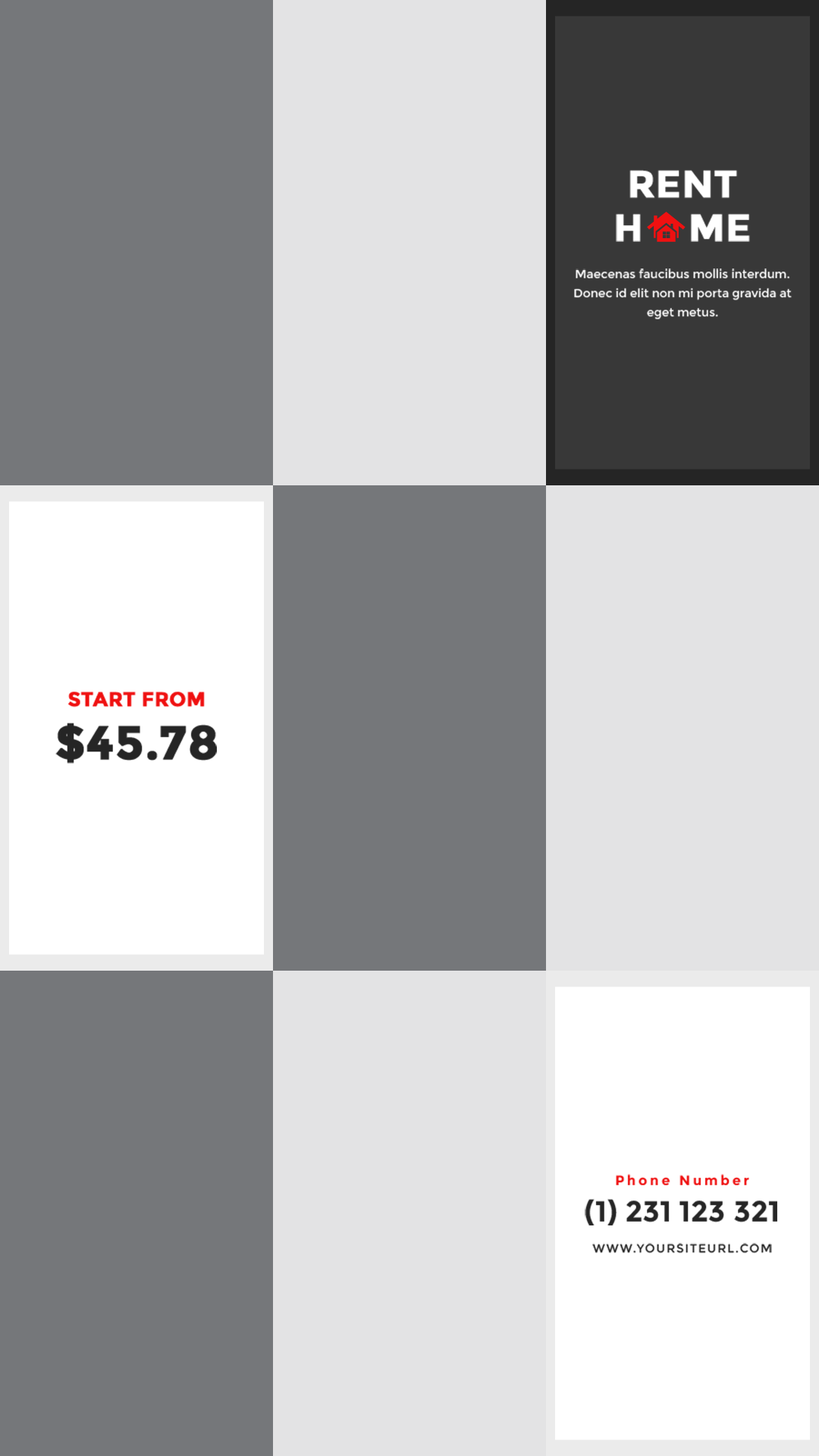
<style>
.page{position:relative;width:819px;height:1456px;background:#e3e3e4}
.page>*{position:absolute;margin:0}
.t1{font:38.1px/43px "Montserrat-Bold";color:#ffffff;text-transform:uppercase;font-weight:bold}
.t2{font:11.8px/19.1px "Montserrat-Regular";color:#ffffff}
.t3{font:20px/53.5px "Montserrat-Bold";color:#ef1111;text-transform:uppercase;font-weight:bold}
.t4{font:47.3px/53.5px "Montserrat-Bold";color:#252525;text-transform:uppercase;font-weight:bold}
.t5{font:29.1px/36.4px "Montserrat-Bold";color:#252525}
.t6{font:13.6px/36.4px "Montserrat-Bold";letter-spacing:0.2em;color:#ef1111}
.t7{font:11.8px "Montserrat-Regular";letter-spacing:0.1em;color:#252525;text-transform:uppercase}
</style>
<div class="page">
<p class="t1" style="left:616px;top:170px;width:134px;height:72px;text-align:center">rent<br>h    me</p>
<p class="t2" style="left:574px;top:268px;width:218px;height:51px;text-align:center">Maecenas faucibus mollis interdum. Donec id elit non mi porta gravida at eget metus.</p>
<p class="t3" style="left:55px;top:692px;width:162px;height:72px;text-align:center">start from<br><span class="t4">$45.78</span></p>
<p class="t5" style="left:585px;top:1174px;width:192px;height:51px;text-align:center"><span class="t6">Phone Number<br></span>(1) 231 123 321</p>
<p class="t7" style="left:592px;top:1243px;width:180px;height:11px">www.yoursiteurl.com</p>
</div>
